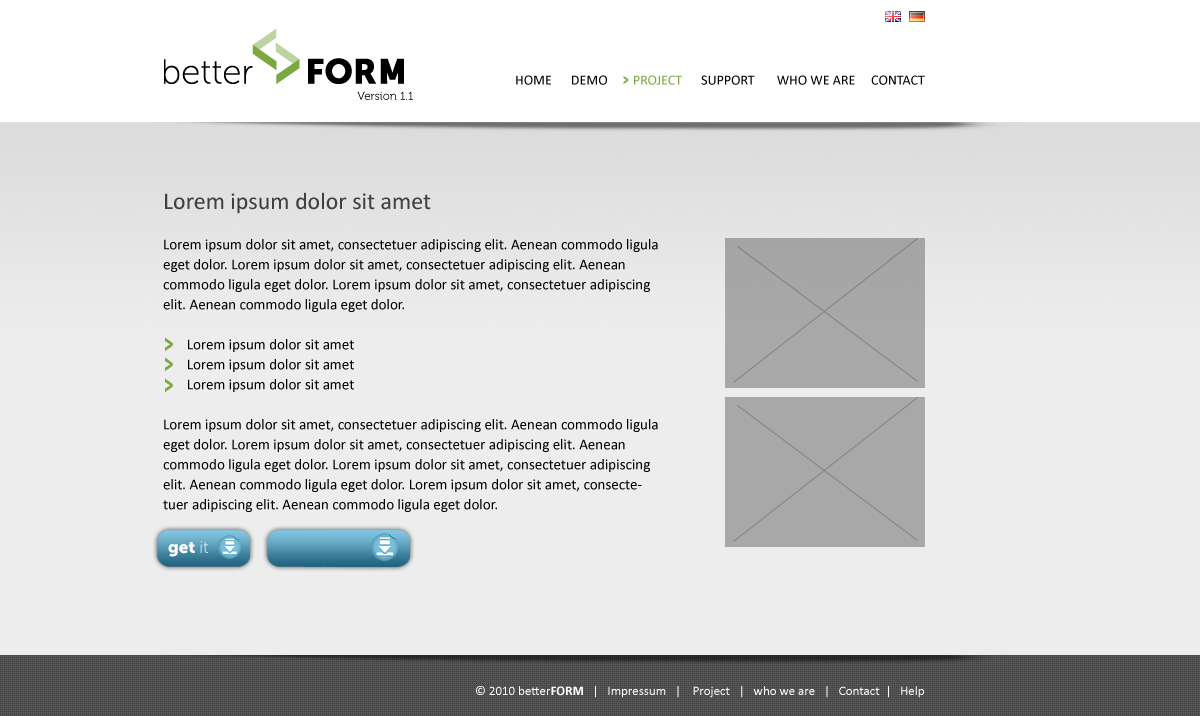
<style>
.page{position:relative;width:1200px;height:716px;background:#ededed}
.page>*{position:absolute;margin:0}
.t1{font:14px "Calibri";color:#000000}
.t2{font:14px "Calibri";color:#7ba841}
.t3{font:15.3px "MuseoSans-900";color:#7ba841;scale:0.61 1}
.t4{font:11.5px "Museo-300"}
.t5{font:24px "Calibri";color:#414040}
.t6{font:15px/20px "Calibri";color:#000000}
.t7{font:25px "MuseoSans-900";color:#7ba841;scale:0.61 1}
.t8{font:13px "Calibri";color:#ffffff}
.t9{font:13px "Calibri-Bold";color:#ffffff}
</style>
<div class="page">
<p class="t1" style="left:516px;top:75px;width:409px;height:10px">HOME      DEMO        <span class="t2">PROJECT      </span>SUPPORT       WHO WE ARE     CONTACT</p>
<p class="t3" style="left:623px;top:75px;width:6px;height:10px">&gt;</p>
<p class="t4" style="left:357px;top:91px;width:56px;height:9px">Version 1.1</p>
<p class="t5" style="left:165px;top:192px;width:266px;height:22px">Lorem ipsum dolor sit amet</p>
<p class="t6" style="left:163px;top:239px;width:495px;height:273px">Lorem ipsum dolor sit amet, consectetuer adipiscing elit. Aenean commodo ligula eget dolor. Lorem ipsum dolor sit amet, consectetuer adipiscing elit. Aenean commodo ligula eget dolor. Lorem ipsum dolor sit amet, consectetuer adipiscing elit. Aenean commodo ligula eget dolor.<br><br>       Lorem ipsum dolor sit amet<br>       Lorem ipsum dolor sit amet<br>       Lorem ipsum dolor sit amet<br><br>Lorem ipsum dolor sit amet, consectetuer adipiscing elit. Aenean commodo ligula eget dolor. Lorem ipsum dolor sit amet, consectetuer adipiscing elit. Aenean commodo ligula eget dolor. Lorem ipsum dolor sit amet, consectetuer adipiscing elit. Aenean commodo ligula eget dolor. Lorem ipsum dolor sit amet, consectetuer adipiscing elit. Aenean commodo ligula eget dolor.</p>
<p class="t7" style="left:165px;top:337px;width:8px;height:15px">&gt;</p>
<p class="t7" style="left:165px;top:357px;width:8px;height:15px">&gt;</p>
<p class="t7" style="left:165px;top:378px;width:8px;height:15px">&gt;</p>
<p class="t8" style="left:476px;top:686px;width:448px;height:12px">© 2010 better<span class="t9">FORM</span>   |   Impressum   |    Project   |   who we are   |   Contact  |   Help</p>
</div>
